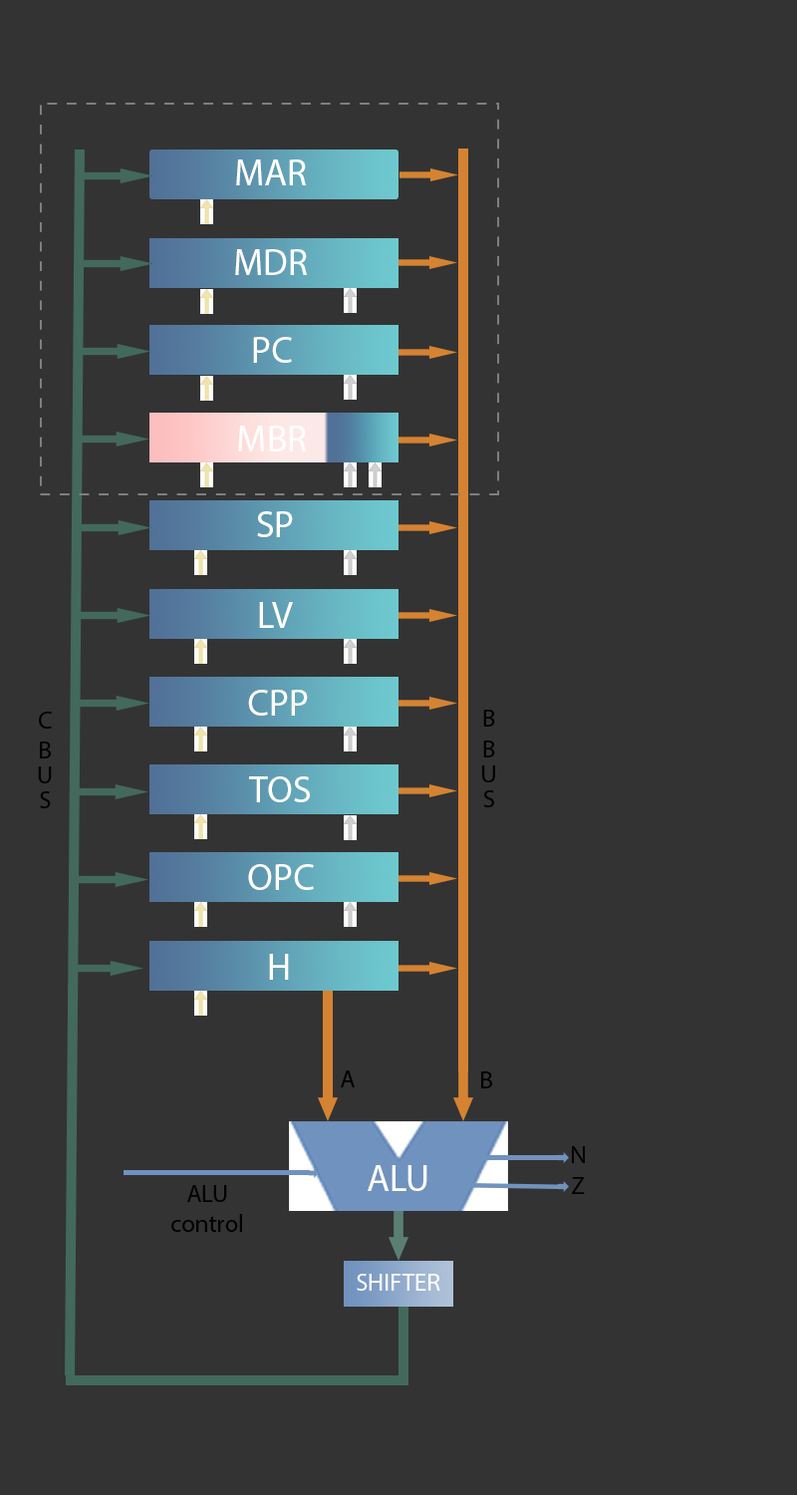
<style>
.page{position:relative;width:797px;height:1495px;background:#333333}
.page>*{position:absolute;margin:0}
.t1{font:37.4px "MyriadPro-Regular";color:#ffffff}
.t2{font:24.9px "MyriadPro-Regular";color:#000000}
.t3{font:24.9px "MyriadPro-Regular";color:#010000}
.t4{font:24.9px "MyriadPro-Regular";color:#ffffff}
</style>
<div class="page">
<p class="t1" style="left:236px;top:159px;width:71px;height:26px">MAR</p>
<p class="t1" style="left:235px;top:249px;width:73px;height:26px">MDR</p>
<p class="t1" style="left:253px;top:337px;width:39px;height:26px">PC</p>
<p class="t1" style="left:238px;top:426px;width:69px;height:26px">MBR</p>
<p class="t1" style="left:257px;top:511px;width:36px;height:26px">SP</p>
<p class="t1" style="left:259px;top:602px;width:34px;height:26px">LV</p>
<p class="t1" style="left:248px;top:690px;width:60px;height:26px">CPP</p>
<p class="t2" style="left:38px;top:712px;width:14px;height:96px">C BUS</p>
<p class="t3" style="left:482px;top:710px;width:13px;height:97px">B BUS</p>
<p class="t1" style="left:249px;top:777px;width:61px;height:25px">TOS</p>
<p class="t1" style="left:248px;top:864px;width:66px;height:26px">OPC</p>
<p class="t1" style="left:269px;top:954px;width:20px;height:26px">H</p>
<p class="t2" style="left:341px;top:1071px;width:14px;height:17px">A</p>
<p class="t2" style="left:481px;top:1072px;width:11px;height:17px">B</p>
<p class="t2" style="left:572px;top:1146px;width:13px;height:17px">N</p>
<p class="t1" style="left:368px;top:1165px;width:60px;height:26px">ALU</p>
<p class="t2" style="left:572px;top:1177px;width:13px;height:17px">Z</p>
<p class="t2" style="left:171px;top:1185px;width:71px;height:47px;text-align:center">ALU<br>control</p>
<p class="t4" style="left:357px;top:1274px;width:84px;height:17px">SHIFTER</p>
</div>
